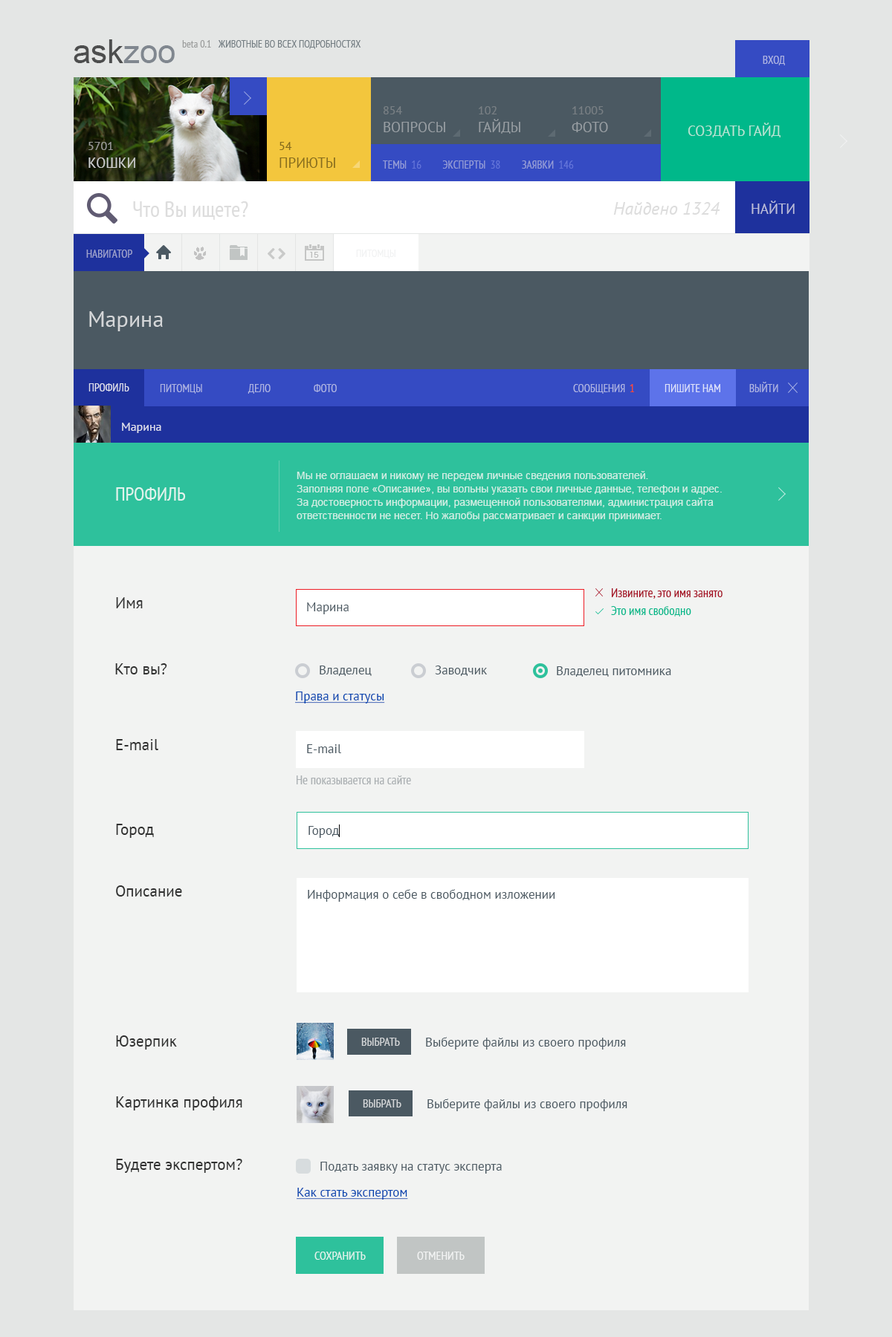
<style>
.page{position:relative;width:892px;height:1337px;background:#f2f3f2}
.page>*{position:absolute;margin:0}
.t1{font:11.1px "PTSans-Narrow";color:#aeb4e2;text-transform:uppercase}
.t2{font:11.1px "PTSans-Narrow";color:#9ea3cd;text-transform:uppercase}
.t3{font:10.4px "PTSans-Narrow";color:#f1f2f2;text-transform:uppercase}
.t4{font:22.3px "PTSans-Regular";color:#d4d6d8}
.t5{font:11.1px "PTSans-Narrow";color:#dfe0ed;text-transform:uppercase}
.t6{font:11.1px "PTSans-Narrow";color:#fd482e;text-transform:uppercase}
.t7{font:11.1px "PTSans-Narrow";color:#dfe3fa;text-transform:uppercase}
.t8{font:11.9px "PTSans-Regular";color:#dfe0ed}
.t9{font:10.4px/13.4px "ArialMT";color:#d0eee4}
.t10{font:19.3px "PTSans-Narrow";color:#e0f3ed;text-transform:uppercase}
.t11{font:12.6px "PTSans-Narrow";color:#a40d21}
.t12{font:15.6px "PTSans-Regular";color:#313131}
.t13{font:12.6px "PTSans-Regular";color:#4b5962}
.t14{font:12.6px "PTSans-Narrow";color:#00b88a}
.t15{font:12.6px "PTSans-Regular";color:#0042af;text-decoration:underline}
.t16{font:12.6px "PTSans-Narrow";color:#abb0b3}
.t17{font:11.9px "PTSans-Narrow";color:#d4d6d8;text-transform:uppercase}
.t18{font:11.9px "PTSans-Narrow";color:#e0f3ed;text-transform:uppercase}
.t19{font:11.9px "PTSans-Narrow";color:#ffffff;text-transform:uppercase}
</style>
<div class="page">
<p class="t1" style="left:762px;top:56px;width:23px;height:9px">вход</p>
<p class="t2" style="left:86px;top:250px;width:46px;height:8px">навигатор</p>
<p class="t3" style="left:356px;top:250px;width:39px;height:9px">питомцы</p>
<p class="t4" style="left:89px;top:311px;width:74px;height:20px">Марина</p>
<p class="t5" style="left:88px;top:383px;width:41px;height:9px">профиль</p>
<p class="t1" style="left:160px;top:384px;width:42px;height:10px">питомцы</p>
<p class="t1" style="left:247px;top:384px;width:23px;height:10px">дело</p>
<p class="t1" style="left:314px;top:384px;width:23px;height:8px">фото</p>
<p class="t1" style="left:573px;top:384px;width:52px;height:10px">сообщения</p>
<p class="t6" style="left:629px;top:384px;width:5px;height:8px">1</p>
<p class="t7" style="left:664px;top:384px;width:56px;height:8px">пишите нам</p>
<p class="t1" style="left:749px;top:382px;width:29px;height:10px">выйти</p>
<p class="t8" style="left:122px;top:423px;width:39px;height:10px">Марина</p>
<p class="t9" style="left:296px;top:471px;width:425px;height:51px">Мы не оглашаем и никому не передем личные сведения пользователей. <br>Заполняя поле «Описание», вы вольны указать свои личные данные, телефон и адрес.<br>За достоверность информации, размещенной пользователями, администрация сайта ответственности не несет. Но жалобы рассматривает и санкции принимает.</p>
<p class="t10" style="left:116px;top:487px;width:70px;height:14px">Профиль</p>
<p class="t11" style="left:611px;top:588px;width:111px;height:11px">Извините, это имя занято</p>
<p class="t12" style="left:116px;top:597px;width:27px;height:12px">Имя</p>
<p class="t13" style="left:307px;top:603px;width:41px;height:11px">Марина</p>
<p class="t14" style="left:611px;top:606px;width:80px;height:11px">Это имя свободно</p>
<p class="t12" style="left:115px;top:664px;width:52px;height:11px">Кто вы?</p>
<p class="t13" style="left:319px;top:666px;width:53px;height:10px">Владелец</p>
<p class="t13" style="left:435px;top:666px;width:52px;height:10px">Заводчик</p>
<p class="t13" style="left:557px;top:666px;width:114px;height:11px">Владелец питомника</p>
<p class="t15" style="left:295px;top:692px;width:90px;height:12px">Права и статусы</p>
<p class="t12" style="left:116px;top:739px;width:42px;height:11px">E-mail</p>
<p class="t13" style="left:307px;top:744px;width:34px;height:9px">Е-mail</p>
<p class="t16" style="left:296px;top:776px;width:115px;height:9px">Не показывается на сайте</p>
<p class="t12" style="left:116px;top:824px;width:38px;height:14px">Город</p>
<p class="t13" style="left:308px;top:826px;width:31px;height:12px">Город</p>
<p class="t12" style="left:116px;top:886px;width:66px;height:11px">Описание</p>
<p class="t13" style="left:308px;top:889px;width:247px;height:13px">Информация о себе в свободном изложении</p>
<p class="t12" style="left:116px;top:1036px;width:61px;height:14px">Юзерпик</p>
<p class="t17" style="left:361px;top:1038px;width:39px;height:8px">Выбрать</p>
<p class="t13" style="left:426px;top:1037px;width:200px;height:13px">Выберите файлы из своего профиля</p>
<p class="t12" style="left:116px;top:1097px;width:126px;height:14px">Картинка профиля</p>
<p class="t17" style="left:363px;top:1100px;width:38px;height:8px">Выбрать</p>
<p class="t13" style="left:427px;top:1099px;width:200px;height:13px">Выберите файлы из своего профиля</p>
<p class="t12" style="left:116px;top:1159px;width:126px;height:14px">Будете экспертом?</p>
<p class="t13" style="left:320px;top:1162px;width:182px;height:12px">Подать заявку на статус эксперта</p>
<p class="t15" style="left:296px;top:1188px;width:112px;height:12px">Как стать экспертом</p>
<p class="t18" style="left:314px;top:1252px;width:52px;height:8px">сохранить</p>
<p class="t19" style="left:417px;top:1252px;width:47px;height:8px;opacity:0.8">отменить</p>
</div>
